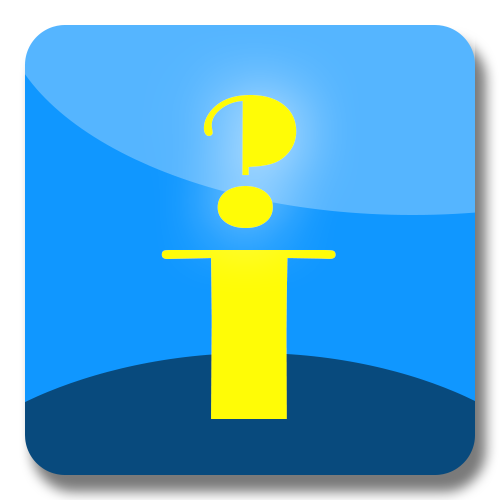
<style>
.page{position:relative;width:500px;height:500px;background:#1097ff}
.page>*{position:absolute;margin:0}
.t1{font:190.5px "Broadway";color:#fffc06}
.t2{font:254px "Broadway";color:#fffc06}
</style>
<div class="page">
<p class="t1" style="left:203px;top:95px;width:94px;height:133px">?</p>
<p class="t2" style="left:161px;top:250px;width:175px;height:169px">T</p>
</div>
